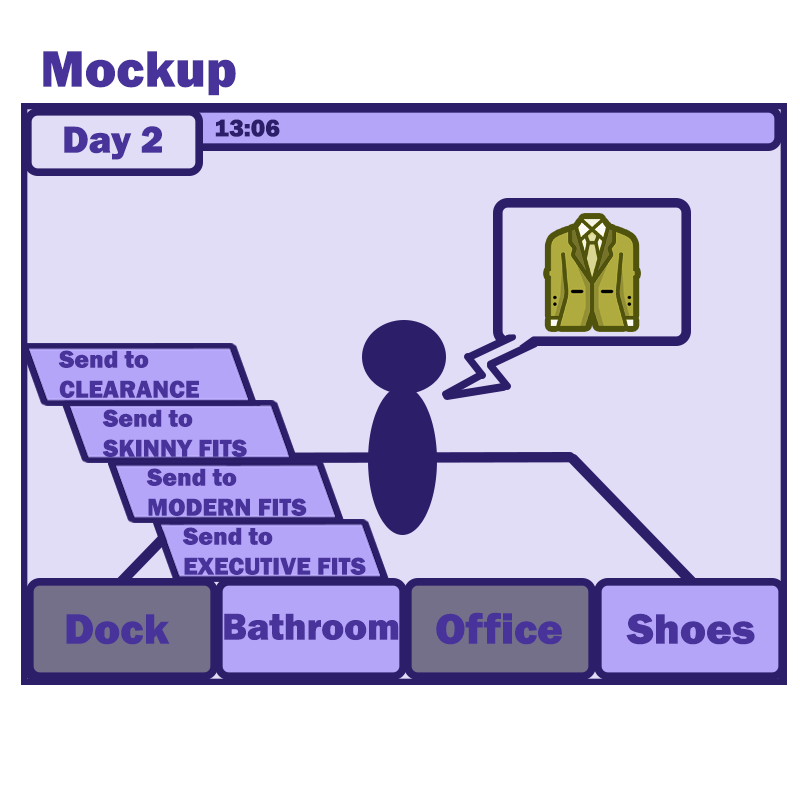
<style>
.page{position:relative;width:800px;height:800px;background:#e2ddf7}
.page>*{position:absolute;margin:0}
.t1{font:53px "FranklinGothic-Heavy";color:#48339b}
.t2{font:39px "FranklinGothic-Heavy";color:#48339b}
.t3{font:25px "FranklinGothic-Heavy";color:#2d1e6a}
.t4{font:25px "FranklinGothic-Heavy";color:#48339b}
.t5{font:44px "FranklinGothic-Heavy";color:#48339b}
.t6{font:38.5px "FranklinGothic-Heavy";color:#48339b}
</style>
<div class="page">
<p class="t1" style="left:43px;top:51px;width:193px;height:45px">Mockup</p>
<p class="t2" style="left:64px;top:126px;width:99px;height:34px">Day 2</p>
<p class="t3" style="left:215px;top:119px;width:65px;height:18px">13:06</p>
<p class="t4" style="left:58px;top:350px;width:141px;height:48px">Send to<br>CLEARANCE</p>
<p class="t4" style="left:102px;top:409px;width:145px;height:48px">Send to<br>SKINNY FITS</p>
<p class="t4" style="left:146px;top:468px;width:161px;height:48px">Send to<br>MODERN FITS</p>
<p class="t4" style="left:182px;top:527px;width:184px;height:48px">Send to<br>EXECUTIVE FITS</p>
<p class="t5" style="left:66px;top:614px;width:104px;height:31px">Dock</p>
<p class="t6" style="left:224px;top:613px;width:175px;height:28px">Bathroom</p>
<p class="t5" style="left:436px;top:612px;width:126px;height:33px">Office</p>
<p class="t5" style="left:626px;top:613px;width:129px;height:32px">Shoes</p>
</div>
